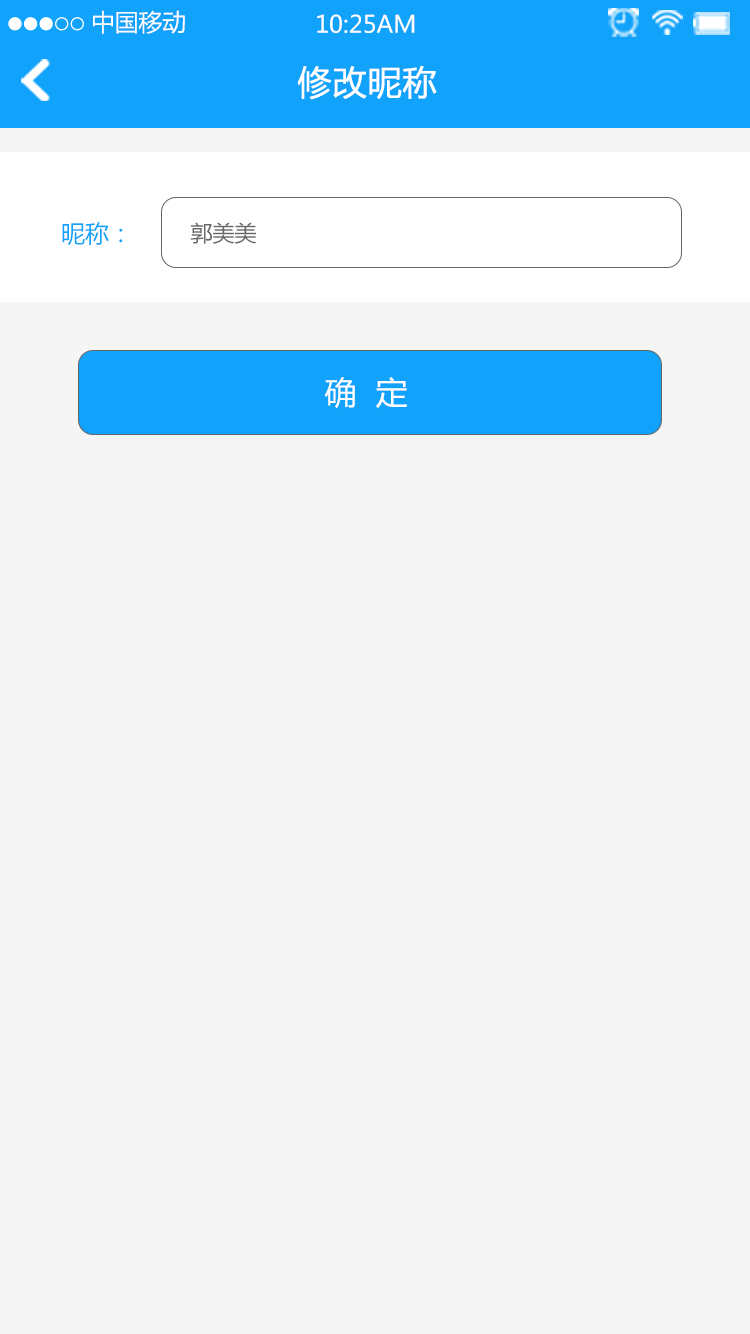
<style>
.page{position:relative;width:750px;height:1334px;background:#f5f5f5}
.page>*{position:absolute;margin:0}
.t1{font:23.7px "MicrosoftYaHei";color:#ffffff}
.t2{font:34px "MicrosoftYaHei";color:#ffffff;font-weight:bold}
.t3{font:24px "MicrosoftYaHei";color:#11a2fb}
.t4{font:22px "MicrosoftYaHei";color:#666666}
.t5{font:32px "MicrosoftYaHei";color:#ffffff}
</style>
<div class="page">
<p class="t1" style="left:93px;top:10px;width:92px;height:24px">中国移动</p>
<p class="t1" style="left:317px;top:14px;width:98px;height:19px">10:25AM</p>
<p class="t2" style="left:297px;top:65px;width:140px;height:35px">修改昵称</p>
<p class="t3" style="left:62px;top:222px;width:61px;height:24px">昵称：</p>
<p class="t4" style="left:190px;top:222px;width:67px;height:22px">郭美美</p>
<p class="t5" style="left:324px;top:377px;width:84px;height:32px">确  定</p>
</div>
